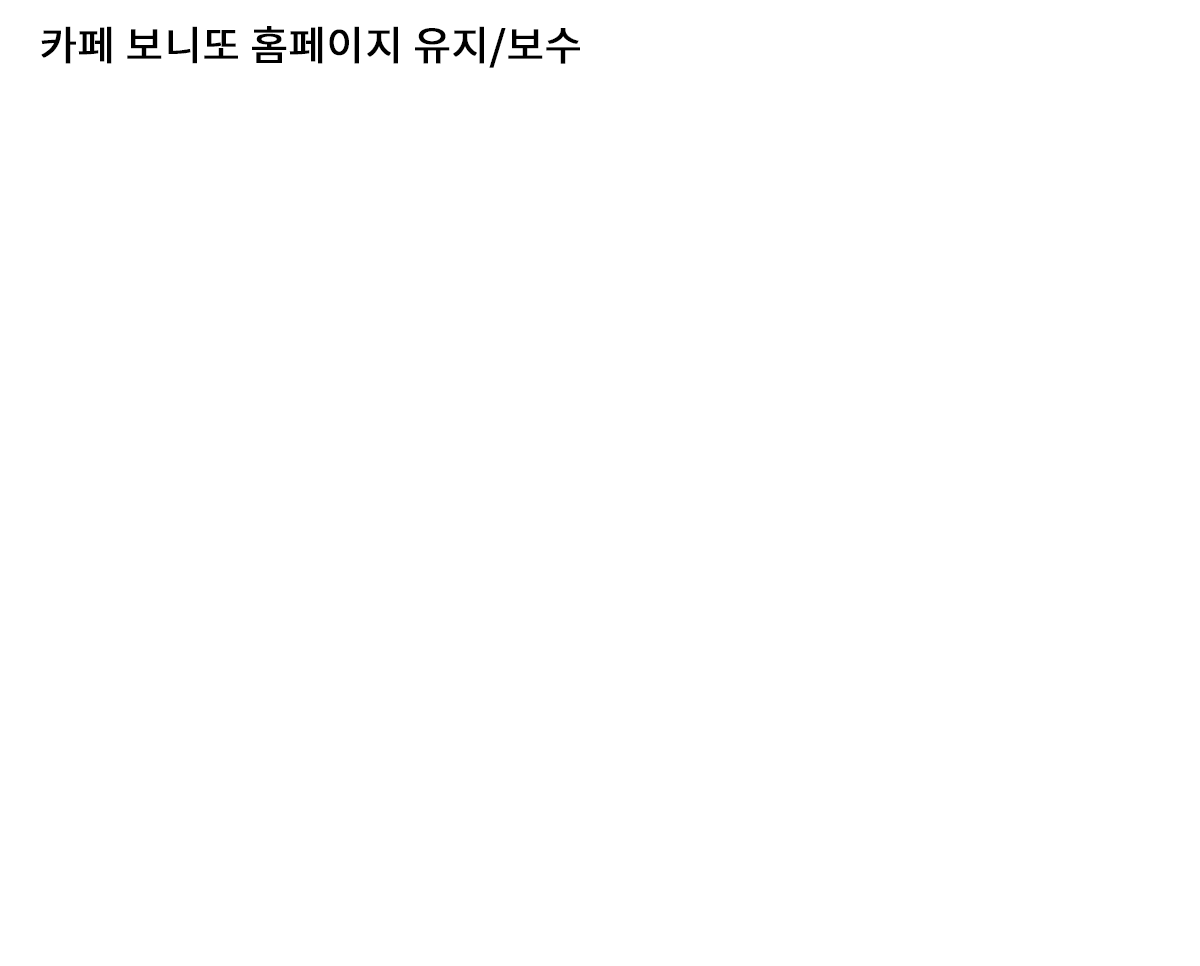
<style>
.page{position:relative;width:1200px;height:966px;background:#ffffff}
.page>*{position:absolute;margin:0}
.t1{font:40.5px "NotoSansKR-Regular";color:#000000;font-weight:bold}
</style>
<div class="page">
<p class="t1" style="left:41px;top:26px;width:539px;height:42px">카페 보니또 홈페이지 유지/보수</p>
</div>
